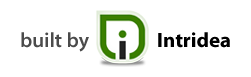
<style>
.page{position:relative;width:251px;height:77px;background:#ffffff}
.page>*{position:absolute;margin:0}
.t1{font:20.9px "MyriadPro-Semibold";color:#4b4b4b}
.t2{font:20.9px "MyriadPro-Bold";color:#000000}
</style>
<div class="page">
<p class="t1" style="left:21px;top:32px;width:68px;height:20px">built by</p>
<p class="t2" style="left:158px;top:32px;width:72px;height:16px">Intridea</p>
</div>
